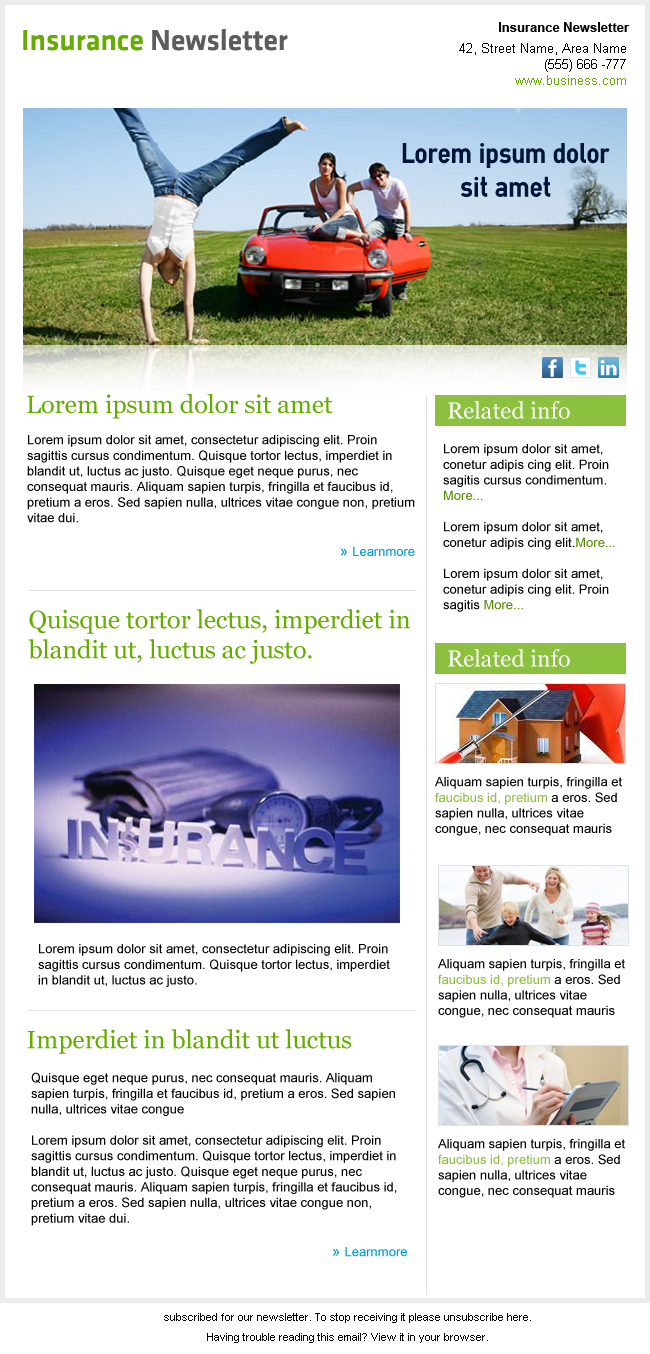
<style>
.page{position:relative;width:650px;height:1354px;background:#ffffff}
.page>*{position:absolute;margin:0}
.t1{font:30px "KlavikaMedium-Plain";color:#5c5c5c}
.t2{font:30px "KlavikaMedium-Plain";color:#65ac00}
.t3{font:13px "Arial-BoldMT";color:#000000}
.t4{font:13px "ArialMT";color:#000000}
.t5{font:13px "ArialMT";color:#65ac00}
.t6{font:28px "CABNDWebBold";color:#001537}
.t7{font:25px "Georgia";color:#65ac00}
.t8{font:23px "Georgia";color:#ffffff}
.t9{font:15px "ArialMT";color:#0099cc}
.t10{font:13px "ArialMT";color:#0099cc}
.t11{font:13px "ArialMT";color:#548c03}
.t12{font:13px "ArialMT";color:#8cc140}
.t13{font:11px/20px "ArialMT";color:#000000}
</style>
<div class="page">
<p class="t1" style="left:23px;top:28px;width:265px;height:23px"><span class="t2">Insurance </span>Newsletter</p>
<p class="t3" style="left:499px;top:22px;width:131px;height:10px">Insurance Newsletter</p>
<p class="t4" style="left:459px;top:43px;width:167px;height:42px;text-align:right">42, Street Name, Area Name<br>(555) 666 -777<br><span class="t5">www.business.com</span></p>
<p class="t6" style="left:402px;top:143px;width:208px;height:54px;text-align:center">Lorem ipsum dolor <br>sit amet</p>
<p class="t7" style="left:27px;top:394px;width:306px;height:25px">Lorem ipsum dolor sit amet</p>
<p class="t8" style="left:448px;top:401px;width:122px;height:18px">Related info</p>
<p class="t4" style="left:27px;top:435px;width:388px;height:121px">Lorem ipsum dolor sit amet, consectetur adipiscing elit. Proin sagittis cursus condimentum. Quisque tortor lectus, imperdiet in blandit ut, luctus ac justo. Quisque eget neque purus, nec consequat mauris. Aliquam sapien turpis, fringilla et faucibus id, pretium a eros. Sed sapien nulla, ultrices vitae congue non, pretium vitae dui.<br><br><span class="t9">» </span><span class="t10">Learnmore</span></p>
<p class="t4" style="left:443px;top:444px;width:172px;height:168px">Lorem ipsum dolor sit amet, conetur adipis cing elit. Proin sagitis cursus condimentum. <span class="t11">More...<br><br></span>Lorem ipsum dolor sit amet, conetur adipis cing elit.<span class="t11">More...<br><br></span>Lorem ipsum dolor sit amet, conetur adipis cing elit. Proin sagitis <span class="t11">More...</span></p>
<p class="t7" style="left:28px;top:609px;width:382px;height:55px">Quisque tortor lectus, imperdiet in blandit ut, luctus ac justo.</p>
<p class="t8" style="left:448px;top:649px;width:122px;height:18px">Related info</p>
<p class="t4" style="left:435px;top:777px;width:187px;height:59px">Aliquam sapien turpis, fringilla et <span class="t12">faucibus id, pretium</span> a eros. Sed sapien nulla, ultrices vitae congue, nec consequat mauris</p>
<p class="t4" style="left:38px;top:944px;width:352px;height:43px">Lorem ipsum dolor sit amet, consectetur adipiscing elit. Proin sagittis cursus condimentum. Quisque tortor lectus, imperdiet in blandit ut, luctus ac justo.</p>
<p class="t4" style="left:438px;top:959px;width:187px;height:59px">Aliquam sapien turpis, fringilla et <span class="t12">faucibus id, pretium</span> a eros. Sed sapien nulla, ultrices vitae congue, nec consequat mauris</p>
<p class="t7" style="left:27px;top:1029px;width:325px;height:25px">Imperdiet in blandit ut luctus</p>
<p class="t4" style="left:31px;top:1072px;width:376px;height:185px">Quisque eget neque purus, nec consequat mauris. Aliquam sapien turpis, fringilla et faucibus id, pretium a eros. Sed sapien nulla, ultrices vitae congue<br><br>Lorem ipsum dolor sit amet, consectetur adipiscing elit. Proin <br>sagittis cursus condimentum. Quisque tortor lectus, imperdiet in blandit ut, luctus ac justo. Quisque eget neque purus, nec consequat mauris. Aliquam sapien turpis, fringilla et faucibus id, pretium a eros. Sed sapien nulla, ultrices vitae congue non, pretium vitae dui.<br><br><span class="t9">» </span><span class="t10">Learnmore</span></p>
<p class="t4" style="left:438px;top:1139px;width:187px;height:59px">Aliquam sapien turpis, fringilla et <span class="t12">faucibus id, pretium</span> a eros. Sed sapien nulla, ultrices vitae congue, nec consequat mauris</p>
<p class="t13" style="left:164px;top:1313px;width:367px;height:30px;text-align:center">subscribed for our newsletter. To stop receiving it please unsubscribe here.<br>Having trouble reading this email? View it in your browser.</p>
</div>
